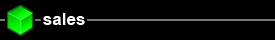
<style>
.page{position:relative;width:275px;height:40px;background:#000000}
.page>*{position:absolute;margin:0}
.t1{font:17px "Arial-BoldMT";color:#ffffff}
</style>
<div class="page">
<p class="t1" style="left:43px;top:13px;width:42px;height:12px">sales</p>
</div>
